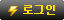
<style>
.page{position:relative;width:64px;height:20px}
.page>*{position:absolute;margin:0}
.t1{font:12px "morris9";letter-spacing:-0.05em;color:#ffd800;font-weight:bold}
</style>
<div class="page">
<p class="t1" style="left:23px;top:5px;width:32px;height:10px">로그인</p>
</div>
